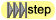
<style>
.page{position:relative;width:56px;height:20px;background:#fffb92}
.page>*{position:absolute;margin:0}
.t1{font:12px "ArialMT";color:#000000;font-weight:bold}
</style>
<div class="page">
<p class="t1" style="left:27px;top:5px;width:24px;height:12px">step</p>
</div>
